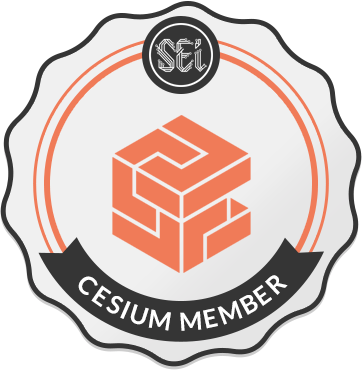
<style>
.page{position:relative;width:362px;height:375px;background:#f0f0f0}
.page>*{position:absolute;margin:0}
.t1{font:25px/66.3px "Lato-Bold";letter-spacing:0.1em;color:#ffffff}
</style>
<div class="page">
<p class="t1" style="left:78px;top:275px;width:210px;height:56px;text-align:center">CESIUM MEMBER</p>
</div>
